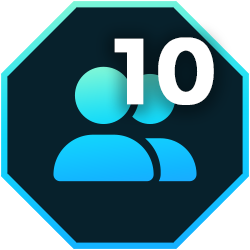
<style>
.page{position:relative;width:250px;height:250px;background:#07212c}
.page>*{position:absolute;margin:0}
.t1{font:91.7px "Montserrat-Bold";letter-spacing:0.02em;color:#ffffff;font-weight:bold}
</style>
<div class="page">
<p class="t1" style="left:114px;top:37px;width:100px;height:68px">10</p>
</div>
